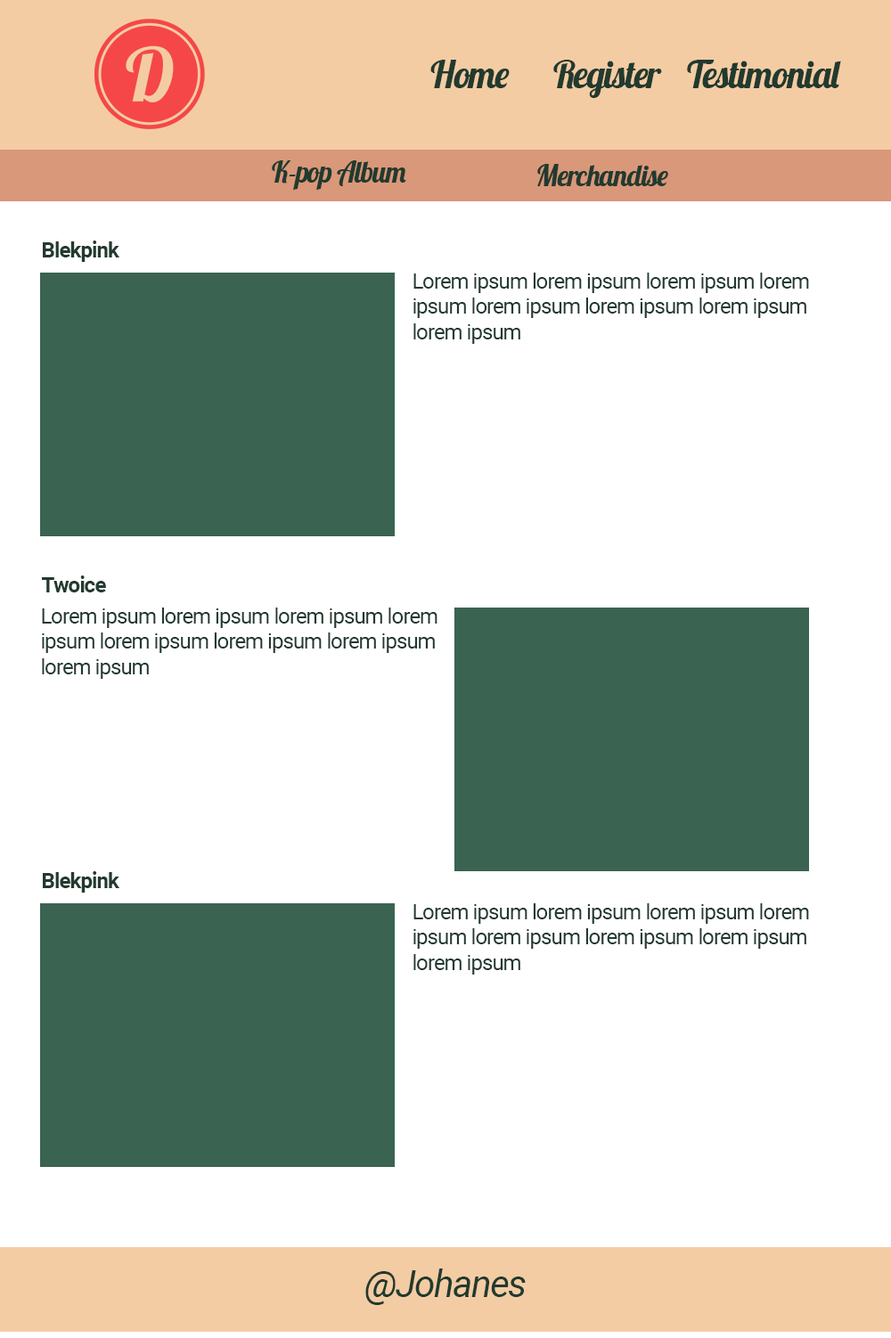
<style>
.page{position:relative;width:891px;height:1338px;background:#ffffff}
.page>*{position:absolute;margin:0}
.t1{font:37.4px "Lobster-Regular";letter-spacing:-0.04em;color:#223a2f}
.t2{font:28.7px "Lobster-Regular";letter-spacing:-0.04em;color:#223a2f}
.t3{font:21.4px "Roboto-Bold";letter-spacing:-0.04em;color:#223a2f}
.t4{font:21.4px "Roboto-Regular";letter-spacing:-0.04em;color:#223a2f}
.t5{font:37.4px "Roboto-Italic";letter-spacing:-0.04em;color:#223a2f}
</style>
<div class="page">
<p class="t1" style="left:430px;top:60px;width:80px;height:28px">Home</p>
<p class="t1" style="left:553px;top:60px;width:109px;height:38px">Register</p>
<p class="t1" style="left:687px;top:60px;width:154px;height:28px">Testimonial</p>
<p class="t2" style="left:272px;top:160px;width:134px;height:30px">K-pop Album</p>
<p class="t2" style="left:537px;top:164px;width:131px;height:22px">Merchandise</p>
<p class="t3" style="left:43px;top:241px;width:77px;height:21px">Blekpink</p>
<p class="t4" style="left:413px;top:273px;width:396px;height:71px">Lorem ipsum lorem ipsum lorem ipsum lorem ipsum lorem ipsum lorem ipsum lorem ipsum lorem ipsum</p>
<p class="t3" style="left:42px;top:576px;width:64px;height:17px">Twoice</p>
<p class="t4" style="left:42px;top:608px;width:395px;height:71px">Lorem ipsum lorem ipsum lorem ipsum lorem ipsum lorem ipsum lorem ipsum lorem ipsum lorem ipsum</p>
<p class="t3" style="left:43px;top:871px;width:77px;height:22px">Blekpink</p>
<p class="t4" style="left:413px;top:903px;width:396px;height:72px">Lorem ipsum lorem ipsum lorem ipsum lorem ipsum lorem ipsum lorem ipsum lorem ipsum lorem ipsum</p>
<p class="t5" style="left:365px;top:1269px;width:161px;height:36px">@Johanes</p>
</div>
